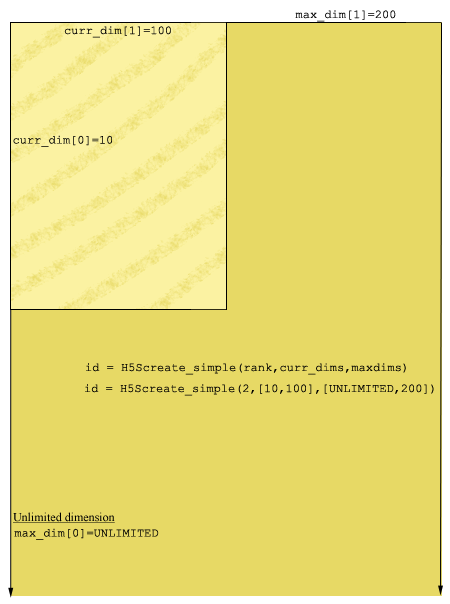
<style>
.page{position:relative;width:450px;height:604px;background:#e7d965}
.page>*{position:absolute;margin:0}
.t1{font:12px "CourierNewPSMT";color:#000000}
.t2{font:12px "TimesNewRomanPSMT";color:#000000;text-decoration:underline}
</style>
<div class="page">
<p class="t1" style="left:295px;top:10px;width:101px;height:12px">max_dim[1]=200</p>
<p class="t1" style="left:64px;top:26px;width:107px;height:12px">curr_dim[1]=100</p>
<p class="t1" style="left:13px;top:135px;width:99px;height:12px">curr_dim[0]=10</p>
<p class="t1" style="left:86px;top:363px;width:320px;height:12px">id = H5Screate_simple(rank,curr_dims,maxdims)</p>
<p class="t1" style="left:85px;top:384px;width:349px;height:12px">id = H5Screate_simple(2,[10,100],[UNLIMITED,200])</p>
<p class="t2" style="left:13px;top:512px;width:102px;height:11px">Unlimited dimension</p>
<p class="t1" style="left:14px;top:528px;width:145px;height:12px">max_dim[0]=UNLIMITED</p>
</div>
